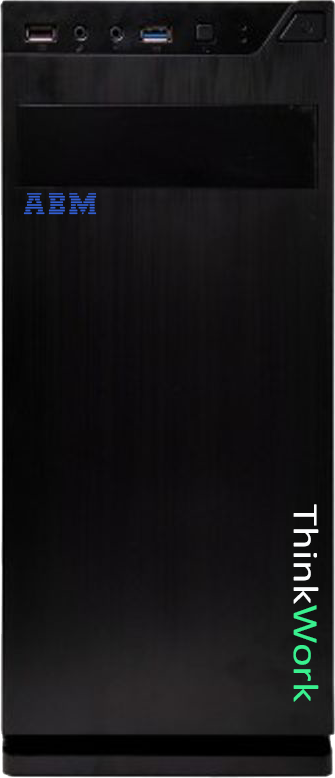
<style>
.page{position:relative;width:335px;height:778px}
.page>*{position:absolute;margin:0}
.t1{font:22.2px "IBM-Logo";color:#335fd2;scale:1.13 1}
.t2{font:36px "Calibri";color:#fcfdfe;scale:1.25 1}
.t3{font:36px "Calibri";color:#39f18f;scale:1.25 1}
</style>
<div class="page">
<p class="t1" style="left:23px;top:193px;width:74px;height:22px">ABM</p>
<p class="t2" style="left:293px;top:504px;width:26px;height:198px;rotate:90deg">Think<span class="t3">Work</span></p>
</div>
